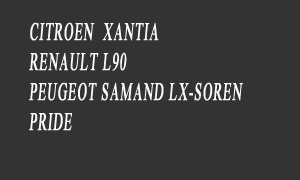
<style>
.page{position:relative;width:300px;height:180px;background:#333333}
.page>*{position:absolute;margin:0}
.t1{font:25px "TimesNewRomanPSMT";letter-spacing:0.075em;color:#fcf9f9;text-transform:uppercase;font-weight:bold;font-style:italic;scale:0.51 1}
</style>
<div class="page">
<p class="t1" style="left:29px;top:22px;width:214px;height:109px">CITROEN  XANTIA<br>RENAULT L90<br>PEUGEOT SAMAND LX-SOREN<br>PRIDE</p>
</div>
